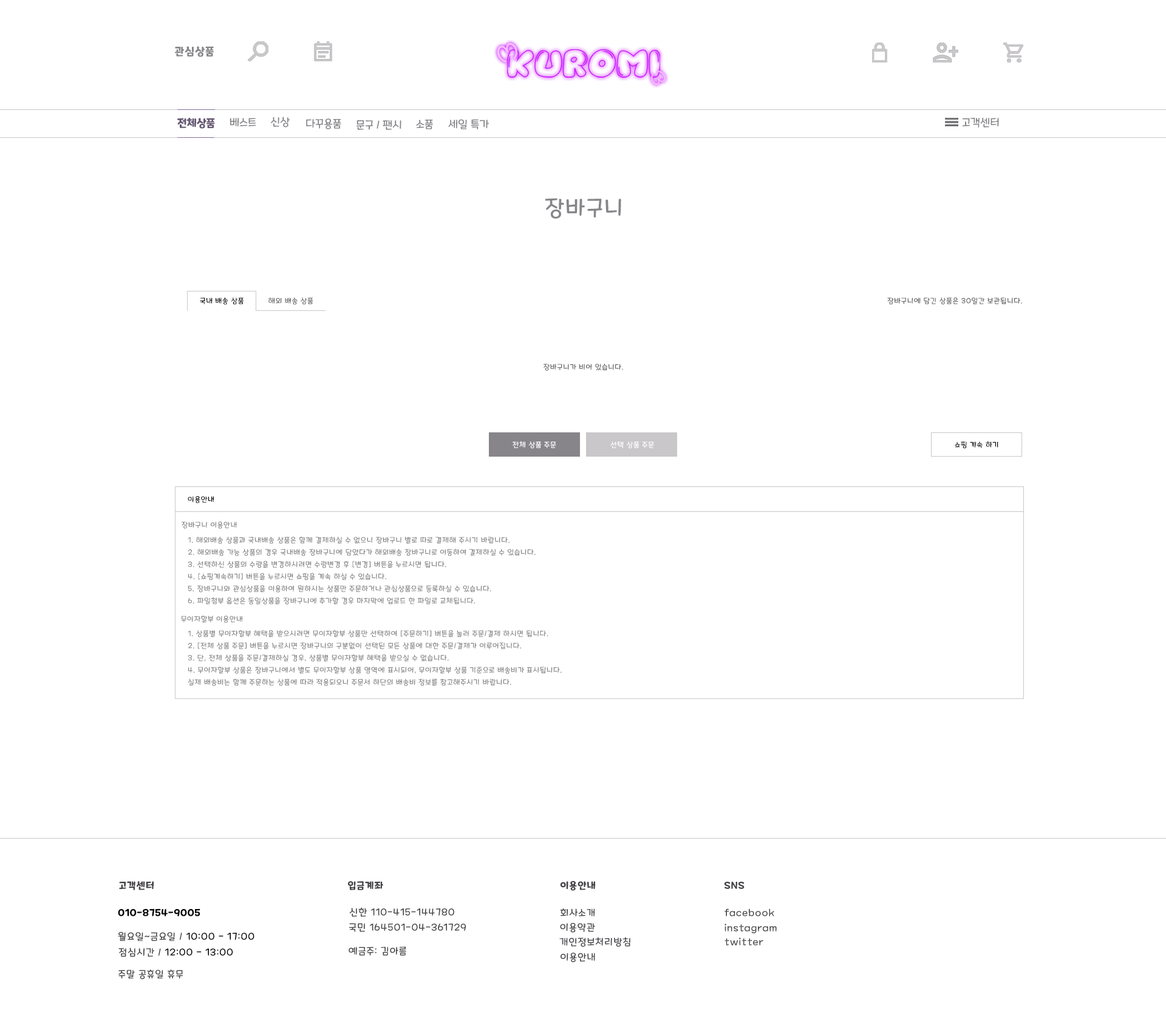
<style>
.page{position:relative;width:1166px;height:1022px;background:#ffffff}
.page>*{position:absolute;margin:0}
.t1{font:10.9px "MaplestoryBold";letter-spacing:0.06em;color:#878589}
.t2{font:10.9px "MaplestoryBold";color:#645772}
.t3{font:10.9px "MaplestoryLight";color:#878589}
.t4{font:21.9px "MaplestoryLight";letter-spacing:0.06em;color:#878589}
.t5{font:7.3px "MaplestoryLight";letter-spacing:0.06em;color:#000000}
.t6{font:7.3px "MaplestoryLight";letter-spacing:0.06em;color:#646165}
.t7{font:7.3px "MaplestoryLight";letter-spacing:0.06em;color:#ffffff}
.t8{font:7.3px "MaplestoryLight";letter-spacing:0.06em;color:#878589}
.t9{font:7.3px/12.1px "MaplestoryLight";letter-spacing:0.06em;color:#878589}
.t10{font:9.7px "MaplestoryBold";letter-spacing:0.06em;color:#464348}
.t11{font:9.7px "MaplestoryBold";letter-spacing:0.06em;color:#000000}
.t12{font:9.7px "MaplestoryLight";letter-spacing:0.06em;color:#464348}
.t13{font:9.7px "MaplestoryLight";letter-spacing:0.06em;color:#000000}
</style>
<div class="page">
<p class="t1" style="left:175px;top:46px;width:39px;height:11px">관심상품</p>
<p class="t2" style="left:177px;top:118px;width:38px;height:11px">전체상품</p>
<p class="t3" style="left:230px;top:118px;width:26px;height:9px">베스트</p>
<p class="t3" style="left:271px;top:117px;width:19px;height:11px">신상</p>
<p class="t3" style="left:306px;top:118px;width:35px;height:11px">다꾸용품</p>
<p class="t3" style="left:357px;top:120px;width:45px;height:10px">문구 / 팬시</p>
<p class="t3" style="left:416px;top:120px;width:17px;height:9px">소품</p>
<p class="t3" style="left:448px;top:119px;width:41px;height:10px">세일 특가</p>
<p class="t3" style="left:963px;top:118px;width:36px;height:10px">고객센터</p>
<p class="t4" style="left:545px;top:198px;width:76px;height:21px">장바구니</p>
<p class="t5" style="left:200px;top:298px;width:44px;height:7px">국내 배송 상품</p>
<p class="t6" style="left:269px;top:297px;width:44px;height:8px">해외 배송 상품</p>
<p class="t6" style="left:888px;top:298px;width:134px;height:7px">장바구니에 담긴 상품은 30일간 보관됩니다.</p>
<p class="t6" style="left:543px;top:364px;width:80px;height:7px">장바구니가 비어 있습니다.</p>
<p class="t7" style="left:513px;top:441px;width:43px;height:8px">전체 상품 주문</p>
<p class="t7" style="left:611px;top:442px;width:43px;height:7px">선택 상품 주문</p>
<p class="t5" style="left:955px;top:441px;width:44px;height:8px">쇼핑 계속 하기</p>
<p class="t5" style="left:188px;top:496px;width:26px;height:8px">이용안내</p>
<p class="t8" style="left:182px;top:522px;width:55px;height:7px">장바구니 이용안내</p>
<p class="t9" style="left:188px;top:536px;width:348px;height:69px">1. 해외배송 상품과 국내배송 상품은 함께 결제하실 수 없으니 장바구니 별로 따로 결제해 주시기 바랍니다.<br>2. 해외배송 가능 상품의 경우 국내배송 장바구니에 담았다가 해외배송 장바구니로 이동하여 결제하실 수 있습니다.<br>3. 선택하신 상품의 수량을 변경하시려면 수량변경 후 [변경] 버튼을 누르시면 됩니다.<br>4. [쇼핑계속하기] 버튼을 누르시면 쇼핑을 계속 하실 수 있습니다.<br>5. 장바구니와 관심상품을 이용하여 원하시는 상품만 주문하거나 관심상품으로 등록하실 수 있습니다.<br>6. 파일첨부 옵션은 동일상품을 장바구니에 추가할 경우 마지막에 업로드 한 파일로 교체됩니다.</p>
<p class="t8" style="left:181px;top:615px;width:61px;height:8px">무이자할부 이용안내</p>
<p class="t9" style="left:188px;top:630px;width:374px;height:56px">1. 상품별 무이자할부 혜택을 받으시려면 무이자할부 상품만 선택하여 [주문하기] 버튼을 눌러 주문/결제 하시면 됩니다.<br>2. [전체 상품 주문] 버튼을 누르시면 장바구니의 구분없이 선택된 모든 상품에 대한 주문/결제가 이루어집니다.<br>3. 단, 전체 상품을 주문/결제하실 경우, 상품별 무이자할부 혜택을 받으실 수 없습니다.<br>4. 무이자할부 상품은 장바구니에서 별도 무이자할부 상품 영역에 표시되어, 무이자할부 상품 기준으로 배송비가 표시됩니다.<br>실제 배송비는 함께 주문하는 상품에 따라 적용되오니 주문서 하단의 배송비 정보를 참고해주시기 바랍니다.</p>
<p class="t10" style="left:119px;top:881px;width:35px;height:10px">고객센터</p>
<p class="t10" style="left:348px;top:881px;width:35px;height:10px">입금계좌</p>
<p class="t10" style="left:560px;top:881px;width:35px;height:10px">이용안내</p>
<p class="t10" style="left:724px;top:882px;width:21px;height:7px">SNS</p>
<p class="t11" style="left:118px;top:909px;width:82px;height:8px">010-8754-9005</p>
<p class="t12" style="left:349px;top:908px;width:105px;height:9px">신한 110-415-144780</p>
<p class="t12" style="left:560px;top:909px;width:35px;height:8px">회사소개</p>
<p class="t12" style="left:725px;top:909px;width:50px;height:8px">facebook</p>
<p class="t12" style="left:349px;top:923px;width:117px;height:9px">국민 164501-04-361729</p>
<p class="t12" style="left:560px;top:923px;width:35px;height:10px">이용약관</p>
<p class="t12" style="left:725px;top:924px;width:52px;height:10px">instagram</p>
<p class="t13" style="left:118px;top:932px;width:137px;height:10px"><span class="t12">월요일~금요일 / </span>10:00 - 17:00</p>
<p class="t12" style="left:559px;top:937px;width:72px;height:10px">개인정보처리방침</p>
<p class="t12" style="left:725px;top:938px;width:39px;height:8px">twitter</p>
<p class="t13" style="left:118px;top:948px;width:115px;height:9px"><span class="t12">점심시간 / </span>12:00 - 13:00</p>
<p class="t12" style="left:349px;top:947px;width:57px;height:9px">예금주: 김아름</p>
<p class="t12" style="left:561px;top:953px;width:34px;height:10px">이용안내</p>
<p class="t12" style="left:118px;top:970px;width:65px;height:10px">주말 공휴일 휴무</p>
</div>
